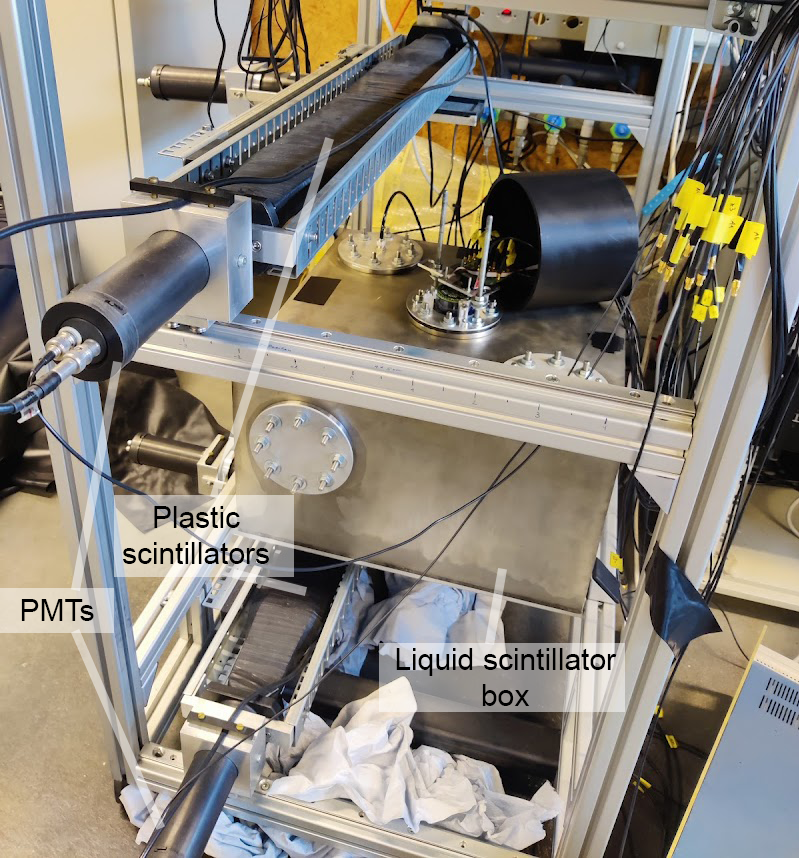
<style>
.page{position:relative;width:799px;height:858px}
.page>*{position:absolute;margin:0}
.t1{font:30px "ArialMT";color:#000000}
</style>
<div class="page">
<p class="t1" style="left:123px;top:506px;width:146px;height:58px;text-align:center">Plastic<br>scintillators</p>
<p class="t1" style="left:21px;top:599px;width:73px;height:22px">PMTs</p>
<p class="t1" style="left:396px;top:648px;width:221px;height:58px;text-align:center">Liquid scintillator box</p>
</div>
